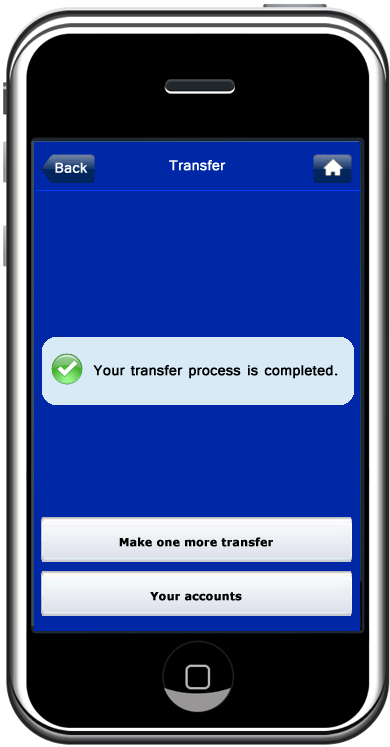
<style>
.page{position:relative;width:390px;height:747px;background:#0027a6}
.page>*{position:absolute;margin:0}
.t1{font:18px "Tunga";color:#ffffff;font-weight:bold}
.t2{font:18px "Tunga";color:#000000;font-weight:bold}
.t3{font:11px/54px "Verdana-Bold";color:#000000;font-weight:bold}
</style>
<div class="page">
<p class="t1" style="left:169px;top:160px;width:57px;height:11px">Transfer</p>
<p class="t1" style="left:55px;top:162px;width:33px;height:11px">Back</p>
<p class="t2" style="left:93px;top:365px;width:245px;height:14px">Your transfer process is completed.</p>
<p class="t3" style="left:119px;top:537px;width:154px;height:64px;text-align:center">Make one more transfer<br>Your accounts</p>
</div>
